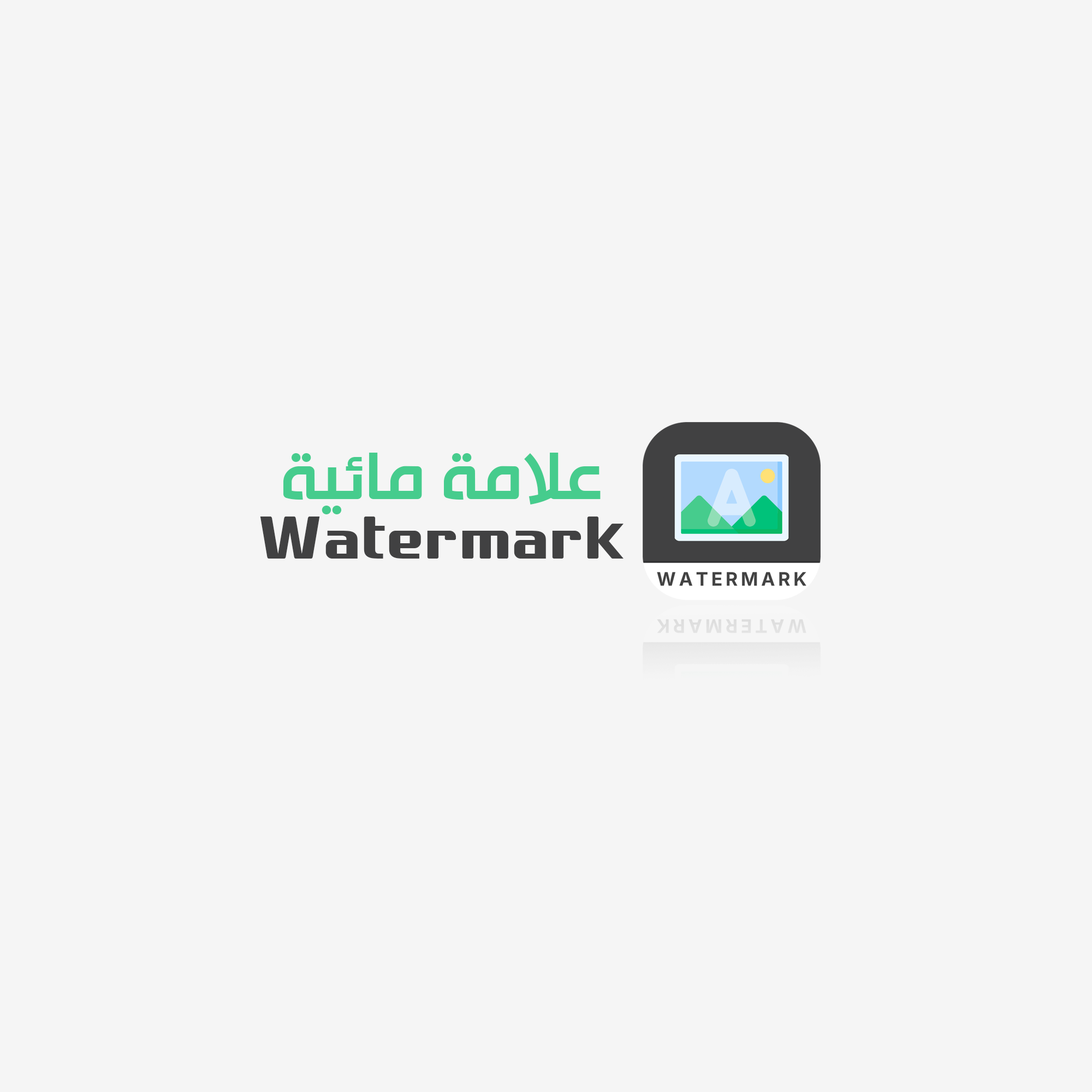
<style>
.page{position:relative;width:1092px;height:1092px;background:#f5f5f5}
.page>*{position:absolute;margin:0}
.t1{font:79.2px "HacenTunisia";color:#46cc8d}
.t2{font:79.2px "AbdoMisr-Black";color:#414142}
</style>
<div class="page">
<p class="t1" style="left:283px;top:453px;width:318px;height:61px">علامة مائية</p>
<p class="t2" style="left:260px;top:517px;width:364px;height:42px">Watermark</p>
</div>
